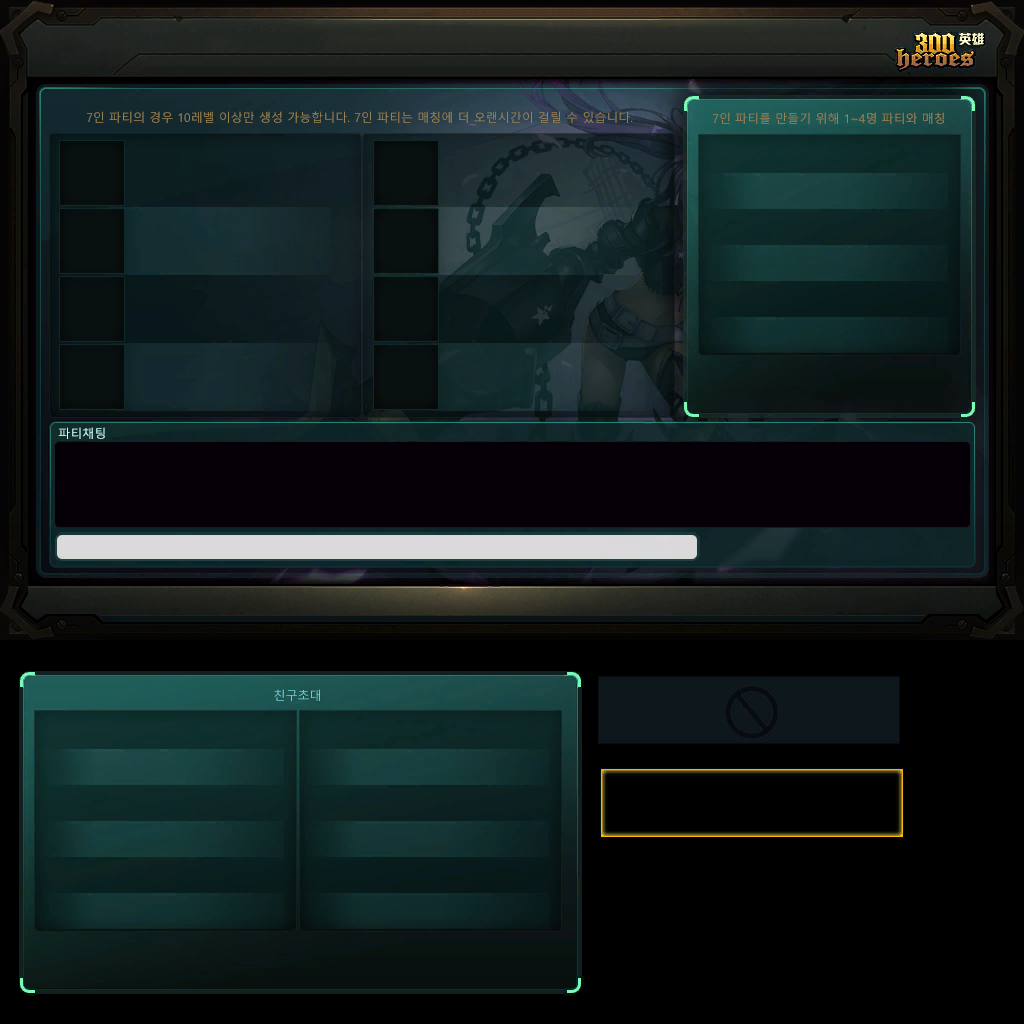
<style>
.page{position:relative;width:1024px;height:1024px}
.page>*{position:absolute;margin:0}
.t1{font:12px "MalgunGothicRegular";color:#9c8252}
.t2{font:12px "MalgunGothicRegular";color:#ceffff}
.t3{font:12px "MalgunGothicRegular";color:#6bcfce}
</style>
<div class="page">
<p class="t1" style="left:87px;top:111px;width:546px;height:12px">7인 파티의 경우 10레벨 이상만 생성 가능합니다. 7인 파티는 매칭에 더 오랜시간이 걸릴 수 있습니다.</p>
<p class="t1" style="left:713px;top:112px;width:231px;height:12px">7인 파티를 만들기 위해 1~4명 파티와 매칭</p>
<p class="t2" style="left:58px;top:427px;width:47px;height:12px">파티채팅</p>
<p class="t3" style="left:274px;top:689px;width:46px;height:12px">친구초대</p>
</div>
